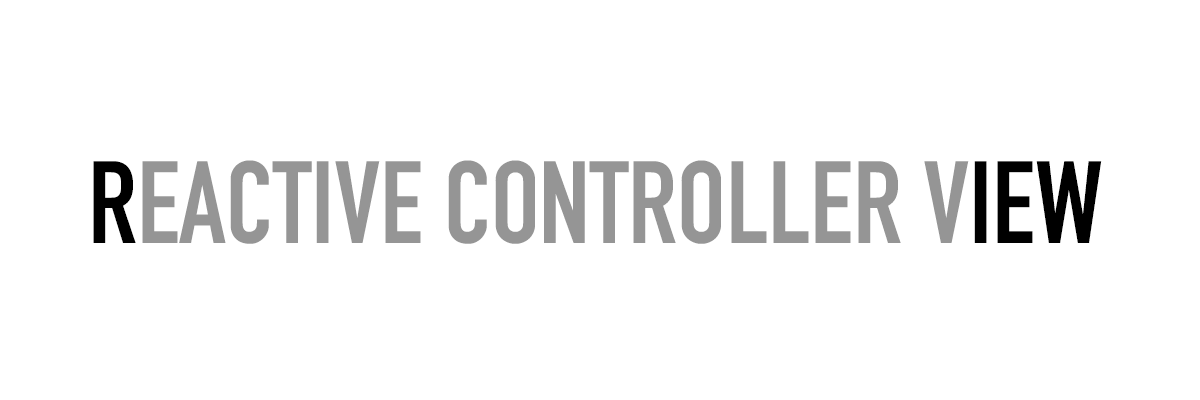
<style>
.page{position:relative;width:1200px;height:400px;background:#ffffff}
.page>*{position:absolute;margin:0}
.t1{font:114.8px "DINCondensed-Bold";color:#959595}
.t2{font:114.8px "DINCondensed-Bold";color:#000000}
</style>
<div class="page">
<p class="t1" style="left:93px;top:160px;width:1009px;height:84px"><span class="t2">R</span>EACTIVE CONTROLLER V<span class="t2">IEW</span></p>
</div>
